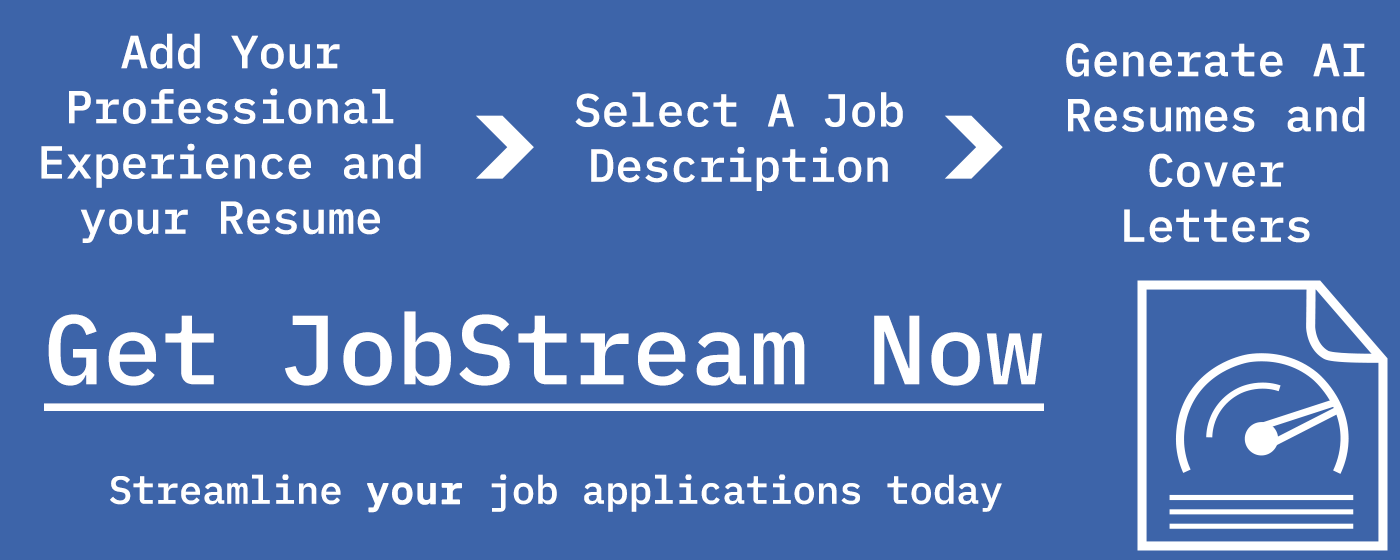
<style>
.page{position:relative;width:1400px;height:560px;background:#3d64a9}
.page>*{position:absolute;margin:0}
.t1{font:46px "IBMPlexMono-Medium";color:#ffffff}
.t2{font:98px "IBMPlexMono-Medium";color:#ffffff;text-decoration:underline}
.t3{font:39px "IBMPlexMono-Medium";color:#ffffff}
.t4{font:39px "IBMPlexMono-Medium";color:#ffffff;font-weight:bold}
</style>
<div class="page">
<p class="t1" style="left:41px;top:33px;width:380px;height:210px;text-align:center">Add Your Professional Experience and your Resume</p>
<p class="t1" style="left:1066px;top:43px;width:299px;height:200px;text-align:center">Generate AI Resumes and Cover Letters</p>
<p class="t1" style="left:575px;top:92px;width:328px;height:99px;text-align:center">Select A Job Description</p>
<p class="t2" style="left:44px;top:311px;width:1000px;height:100px">Get JobStream Now</p>
<p class="t3" style="left:110px;top:474px;width:892px;height:39px">Streamline <span class="t4">your </span>job applications today</p>
</div>
